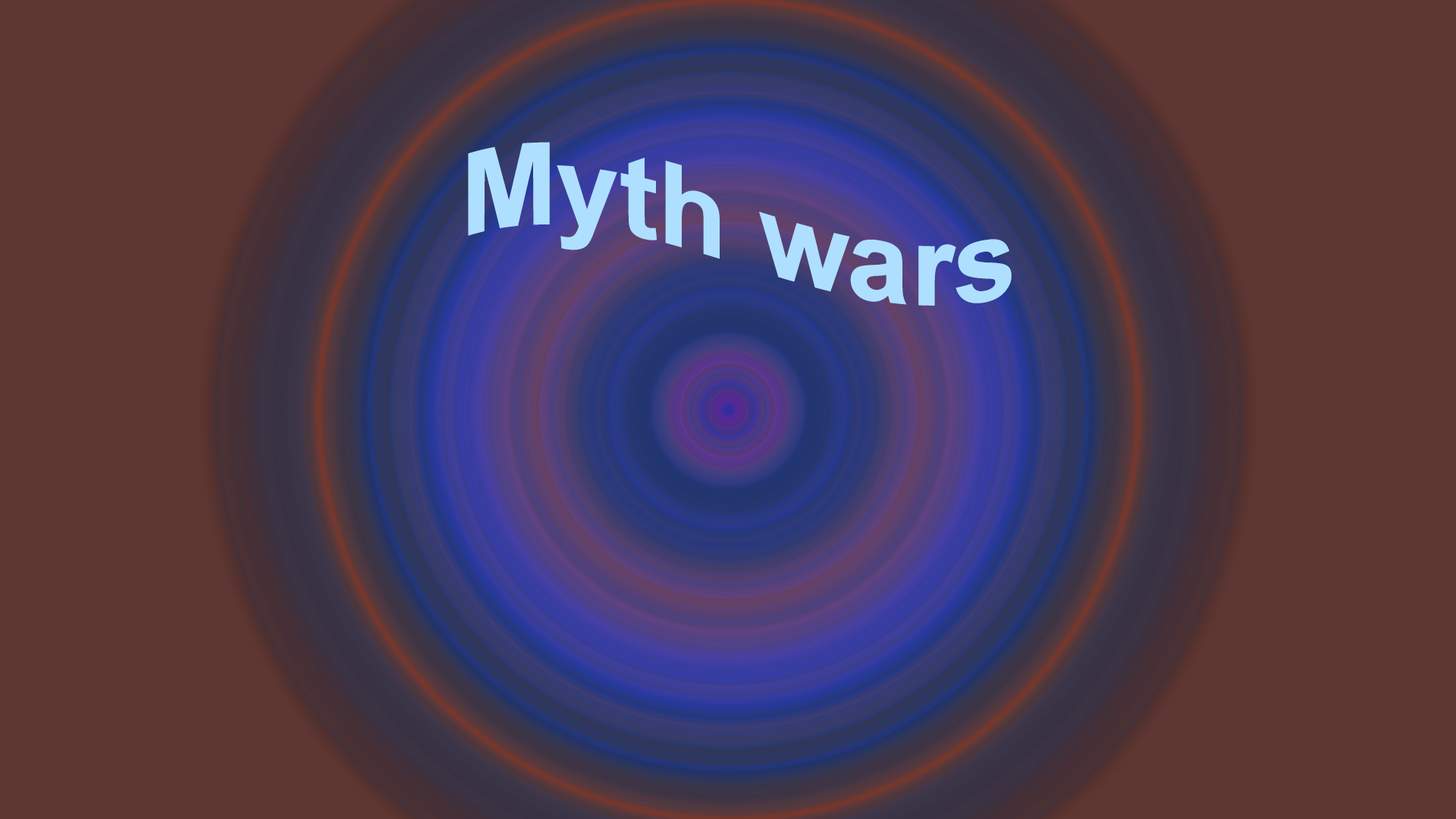
<style>
.page{position:relative;width:1456px;height:819px}
.page>*{position:absolute;margin:0}
.t1{font:113.7px "Arial-BoldMT";color:#aedfff}
</style>
<div class="page">
<p class="t1" style="left:468px;top:142px;width:544px;height:164px">Myth wars</p>
</div>
